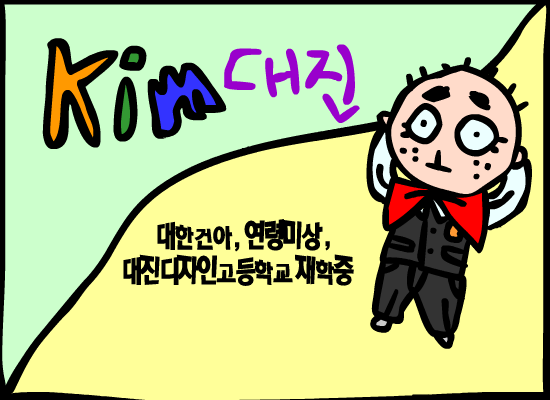
<style>
.page{position:relative;width:550px;height:400px;background:#ffff99}
.page>*{position:absolute;margin:0}
.t1{font:30px "RixComingsoonB";letter-spacing:-0.05em;color:#000000;scale:0.8 1}
.t2{font:30px/36px "RixComingsoonB";letter-spacing:-0.05em;color:#000000;scale:0.8 1}
</style>
<div class="page">
<p class="t1" style="left:157px;top:221px;width:76px;height:29px">대한건아</p>
<p class="t1" style="left:235px;top:219px;width:88px;height:33px">, 연령미상</p>
<p class="t2" style="left:123px;top:241px;width:231px;height:45px">,<br>대진디자인고등학교 재학중</p>
</div>
